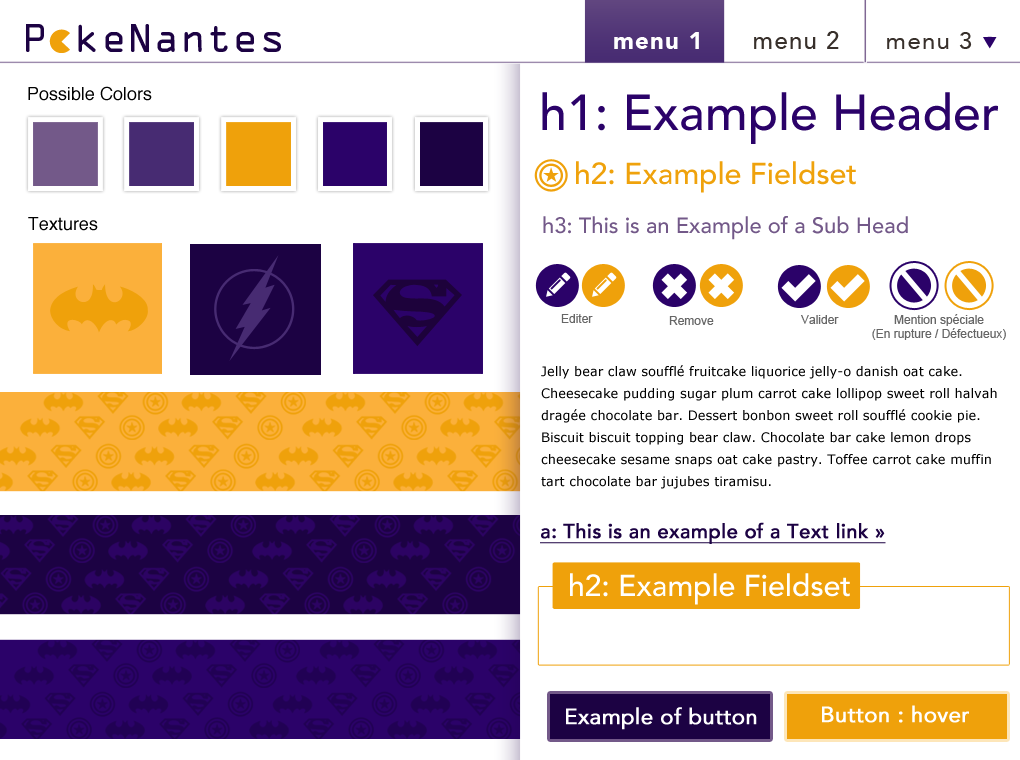
<style>
.page{position:relative;width:1020px;height:760px;background:#ffffff}
.page>*{position:absolute;margin:0}
.t1{font:36.6px "OCRAStd";color:#1c0243}
.t2{font:36.5px "OCRAStd";color:#1c0243}
.t3{font:24px "Avenir-Black";letter-spacing:0.05em;color:#ffffff}
.t4{font:24px "Avenir-Medium";letter-spacing:0.05em;color:#38302b}
.t5{font:24px "Avenir-Roman";letter-spacing:0.05em;color:#38302b}
.t6{font:18px "Helvetica";color:#000000}
.t7{font:50px "Avenir-Medium";color:#2b0269}
.t8{font:30px "Avenir-Medium";color:#efa20c}
.t9{font:22px "Avenir-Medium";color:#735989}
.t10{font:12px "ArialMT";color:#666666}
.t11{font:12px/14px "ArialMT";color:#666666}
.t12{font:13px/22px "Verdana";color:#000000}
.t13{font:20px "Avenir-Medium";color:#1c0243;font-weight:bold;text-decoration:underline}
.t14{font:30px "Avenir-Medium";color:#ffffff}
.t15{font:22px "Avenir-Roman";color:#ffffff;font-weight:bold}
</style>
<div class="page">
<p class="t1" style="left:26px;top:24px;width:255px;height:28px"><span class="t2">P ke</span>Nantes</p>
<p class="t3" style="left:614px;top:32px;width:85px;height:17px">menu 1</p>
<p class="t4" style="left:754px;top:31px;width:85px;height:18px">menu 2</p>
<p class="t5" style="left:887px;top:32px;width:85px;height:17px">menu 3</p>
<p class="t6" style="left:28px;top:86px;width:124px;height:15px">Possible Colors</p>
<p class="t7" style="left:542px;top:92px;width:456px;height:52px">h1: Example Header</p>
<p class="t8" style="left:576px;top:161px;width:280px;height:32px">h2: Example Fieldset</p>
<p class="t6" style="left:28px;top:217px;width:70px;height:14px">Textures</p>
<p class="t9" style="left:543px;top:216px;width:365px;height:24px">h3: This is an Example of a Sub Head</p>
<p class="t10" style="left:561px;top:314px;width:32px;height:9px">Editer</p>
<p class="t10" style="left:669px;top:316px;width:45px;height:9px">Remove</p>
<p class="t10" style="left:801px;top:315px;width:38px;height:9px">Valider</p>
<p class="t11" style="left:872px;top:314px;width:134px;height:26px;text-align:center">Mention spéciale<br>(En rupture / Défectueux)</p>
<p class="t12" style="left:541px;top:365px;width:456px;height:124px">Jelly bear claw soufflé fruitcake liquorice jelly-o danish oat cake. Cheesecake pudding sugar plum carrot cake lollipop sweet roll halvah dragée chocolate bar. Dessert bonbon sweet roll soufflé cookie pie. Biscuit biscuit topping bear claw. Chocolate bar cake lemon drops cheesecake sesame snaps oat cake pastry. Toffee carrot cake muffin tart chocolate bar jujubes tiramisu.</p>
<p class="t13" style="left:540px;top:522px;width:346px;height:22px">a: This is an example of a Text link »</p>
<p class="t14" style="left:570px;top:573px;width:280px;height:32px">h2: Example Fieldset</p>
<p class="t15" style="left:566px;top:707px;width:191px;height:23px">Example of button</p>
<p class="t15" style="left:822px;top:705px;width:147px;height:18px">Button : hover</p>
</div>
